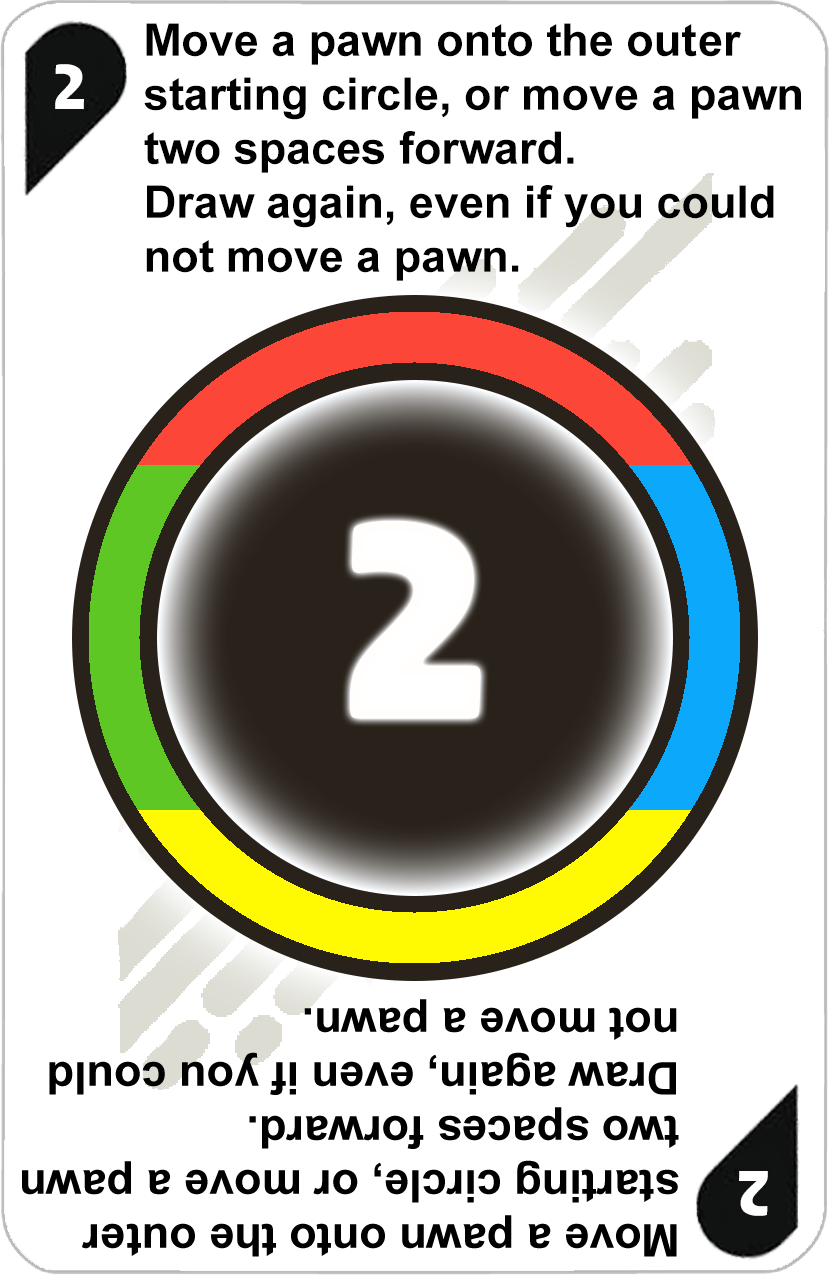
<style>
.page{position:relative;width:829px;height:1275px;background:#ffffff}
.page>*{position:absolute;margin:0}
.t1{font:45px "Arial-BoldMT";color:#000000}
.t2{font:72px "AdGothic-Regular";color:#ffffff}
.t3{font:300px "AdGothic-Regular";color:#ffffff}
</style>
<div class="page">
<p class="t1" style="left:144px;top:23px;width:657px;height:258px">Move a pawn onto the outer<br>starting circle, or move a pawn<br>two spaces forward.<br>Draw again, even if you could <br>not move a pawn.</p>
<p class="t2" style="left:55px;top:64px;width:29px;height:45px">2</p>
<p class="t3" style="left:355px;top:526px;width:121px;height:188px">2</p>
</div>
